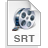
<style>
.page{position:relative;width:48px;height:48px;background:#ffffff}
.page>*{position:absolute;margin:0}
.t1{font:10px "Helvetica-Bold";letter-spacing:0.04em;color:#6f6f6f;text-transform:uppercase}
</style>
<div class="page">
<p class="t1" style="left:14px;top:35px;width:21px;height:7px">srt</p>
</div>
